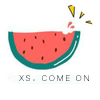
<style>
.page{position:relative;width:100px;height:100px;background:#ffffff}
.page>*{position:absolute;margin:0}
.t1{font:8px "Kalinga";letter-spacing:0.18em;text-transform:uppercase}
.t2{font:8px "SimSun";letter-spacing:0.18em;text-transform:uppercase}
</style>
<div class="page">
<p class="t1" style="left:19px;top:75px;width:70px;height:6px">xs<span class="t2">。</span>come on</p>
</div>
